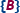
<style>
.page{position:relative;width:20px;height:13px;background:#ffffff}
.page>*{position:absolute;margin:0}
.t1{font:14px "TrebuchetMS-Bold";color:#004084}
.t2{font:14px "Trebuchet-BoldItalic";color:#8e003d}
</style>
<div class="page">
<p class="t1" style="left:0px;top:0px;width:20px;height:13px">{<span class="t2">B</span>}</p>
</div>
